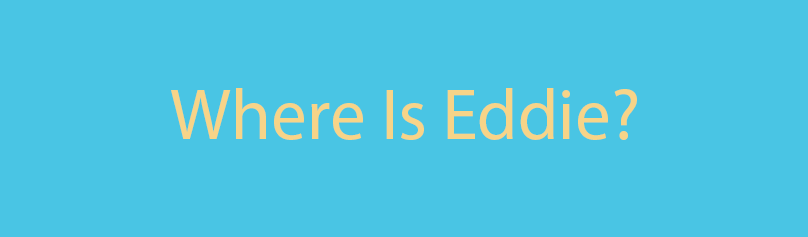
<style>
.page{position:relative;width:808px;height:237px;background:#49c5e4}
.page>*{position:absolute;margin:0}
.t1{font:72px "MyriadPro-Regular";color:#f7d488}
</style>
<div class="page">
<p class="t1" style="left:171px;top:88px;width:466px;height:52px">Where Is Eddie?</p>
</div>
